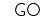
<style>
.page{position:relative;width:56px;height:20px;background:#ffffff}
.page>*{position:absolute;margin:0}
.t1{font:17px "JosefinSansStd-Light";color:#000000}
</style>
<div class="page">
<p class="t1" style="left:15px;top:3px;width:25px;height:13px">GO</p>
</div>
